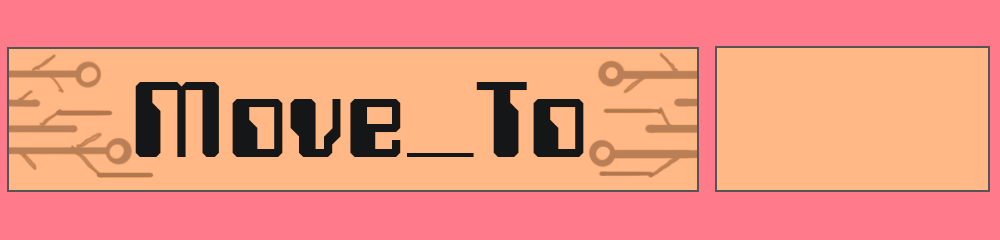
<style>
.page{position:relative;width:1000px;height:240px;background:#ffb886}
.page>*{position:absolute;margin:0}
.t1{font:125px "Computerfont";color:#171615}
</style>
<div class="page">
<p class="t1" style="left:135px;top:82px;width:449px;height:75px">Move_To</p>
</div>
